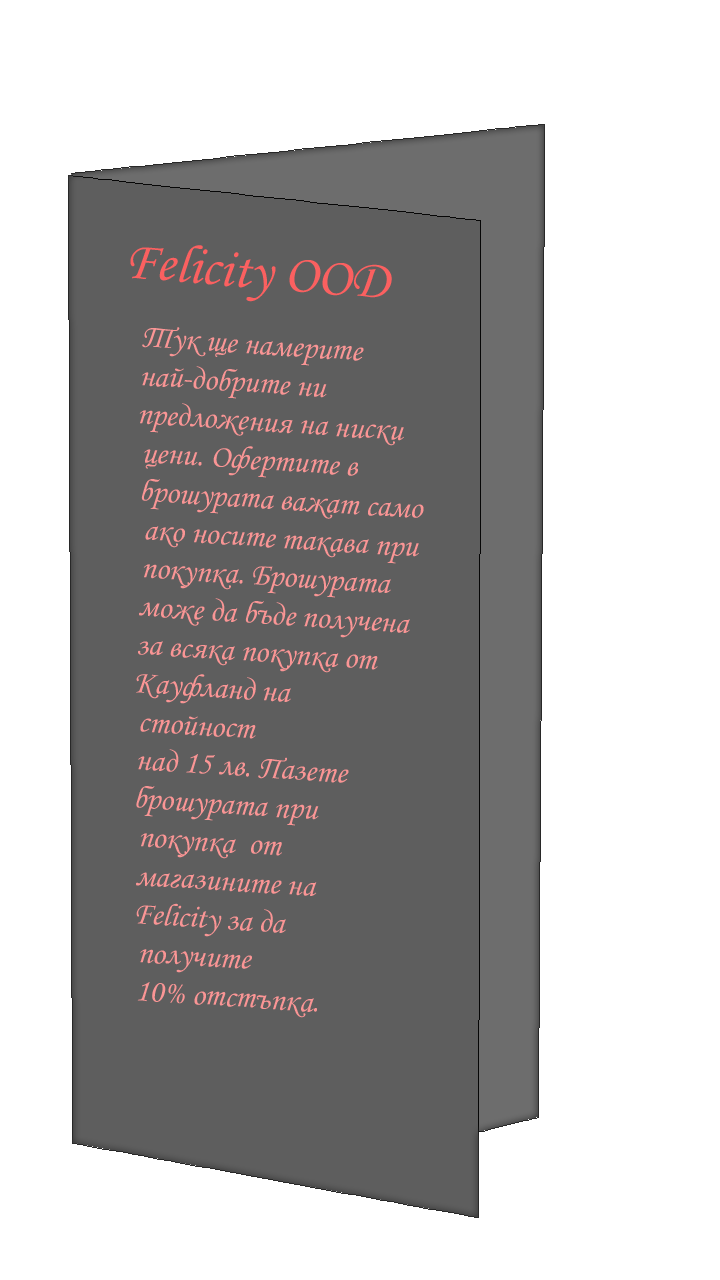
<style>
.page{position:relative;width:720px;height:1280px;background:#ffffff}
.page>*{position:absolute;margin:0}
.t1{font:55px "MonotypeCorsiva";color:#fb6060}
.t2{font:32px "MonotypeCorsiva";color:#fa9595}
</style>
<div class="page">
<p class="t1" style="left:130px;top:245px;width:262px;height:57px;rotate:5deg">Felicity OOD</p>
<p class="t2" style="left:136px;top:327px;width:288px;height:691px;rotate:4deg">Тук ще намерите най-добрите ни                  <br>предложения на ниски  <br> цени. Офертите в <br> брошурата важат само<br>  ако носите такава при <br>  покупка. Брошурата <br>  може да бъде получена <br>  за всяка покупка от <br>  Кауфланд на  <br>   стойност <br>   над 15 лв. Пазете <br>   брошурата при  <br>    покупка  от  <br>    магазините на   <br>    Felicity за да   <br>     получите<br>     10% отстъпка.</p>
</div>
